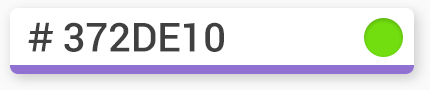
<style>
.page{position:relative;width:430px;height:90px;background:#ffffff}
.page>*{position:absolute;margin:0}
.t1{font:40px "Roboto-Medium";color:#303030}
.t2{font:42px "ProductSans-Regular";color:#303030}
</style>
<div class="page">
<p class="t1" style="left:28px;top:22px;width:196px;height:30px"><span class="t2"># </span>372DE10</p>
</div>
